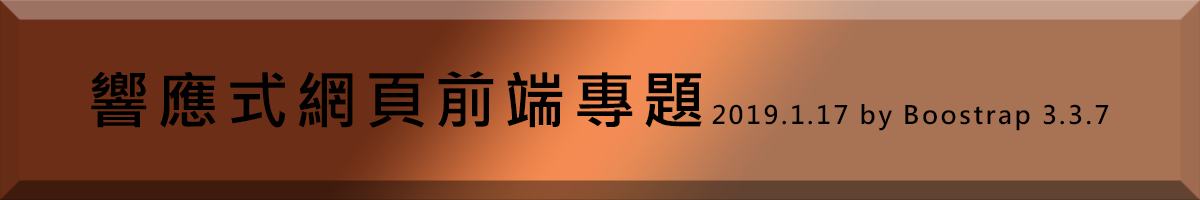
<style>
.page{position:relative;width:1200px;height:200px;background:#a87255}
.page>*{position:absolute;margin:0}
.t1{font:25px "MicrosoftJhengHeiBold";letter-spacing:0.1em;color:#000000}
.t2{font:63px "MicrosoftJhengHeiBold";letter-spacing:0.1em;color:#000000}
</style>
<div class="page">
<p class="t1" style="left:91px;top:71px;width:1018px;height:60px"><span class="t2">響應式網頁前端專題</span>2019.1.17 by Boostrap 3.3.7</p>
</div>
